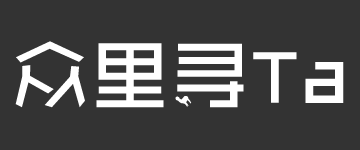
<style>
.page{position:relative;width:360px;height:150px;background:#333333}
.page>*{position:absolute;margin:0}
.t1{font:80px "ZHSCNMT--GBK1-0";color:#ffffff}
</style>
<div class="page">
<p class="t1" style="left:15px;top:41px;width:329px;height:67px">众里寻Ta</p>
</div>
